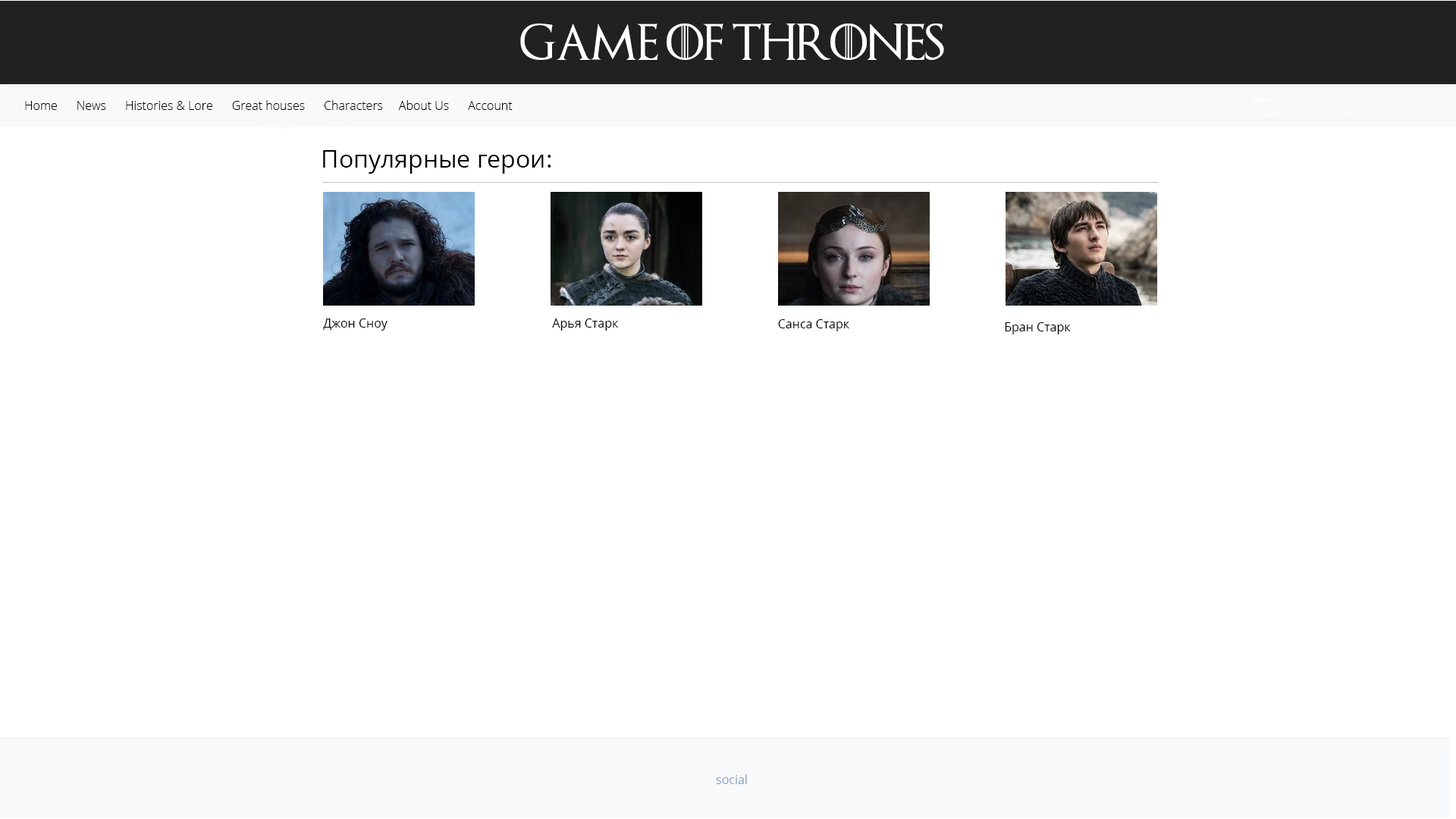
<style>
.page{position:relative;width:1456px;height:819px;background:#ffffff}
.page>*{position:absolute;margin:0}
.t1{font:36.4px "GameofThrones";color:#ffffff}
.t2{font:12.1px "OpenSans-Light";color:#000000}
.t3{font:24.3px "OpenSans-Regular";color:#000000}
.t4{font:12.1px "OpenSans-Regular";color:#000000}
.t5{font:12.1px "OpenSans-Regular";color:#83a3c4}
</style>
<div class="page">
<p class="t1" style="left:520px;top:24px;width:424px;height:36px">Game of Thrones</p>
<p class="t2" style="left:25px;top:100px;width:488px;height:10px">Home      News      Histories &amp; Lore      Great houses      Сharacters     About Us      Account</p>
<p class="t3" style="left:323px;top:150px;width:228px;height:24px">Популярные герои:</p>
<p class="t4" style="left:323px;top:318px;width:65px;height:13px">Джон Сноу</p>
<p class="t4" style="left:552px;top:318px;width:66px;height:13px">Арья Старк</p>
<p class="t4" style="left:778px;top:319px;width:71px;height:12px">Санса Старк</p>
<p class="t4" style="left:1005px;top:322px;width:66px;height:12px">Бран Старк</p>
<p class="t5" style="left:716px;top:774px;width:31px;height:10px">social</p>
</div>
